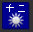
<style>
.page{position:relative;width:33px;height:32px;background:#000090}
.page>*{position:absolute;margin:0}
.t1{font:10.4px "SimSun";color:#ffffff}
</style>
<div class="page">
<p class="t1" style="left:6px;top:4px;width:19px;height:8px">十二</p>
</div>
